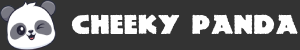
<style>
.page{position:relative;width:300px;height:50px;background:#333333}
.page>*{position:absolute;margin:0}
.t1{font:24px "Lemiesz";color:#ffffff}
</style>
<div class="page">
<p class="t1" style="left:71px;top:14px;width:227px;height:21px">Cheeky Panda</p>
</div>
